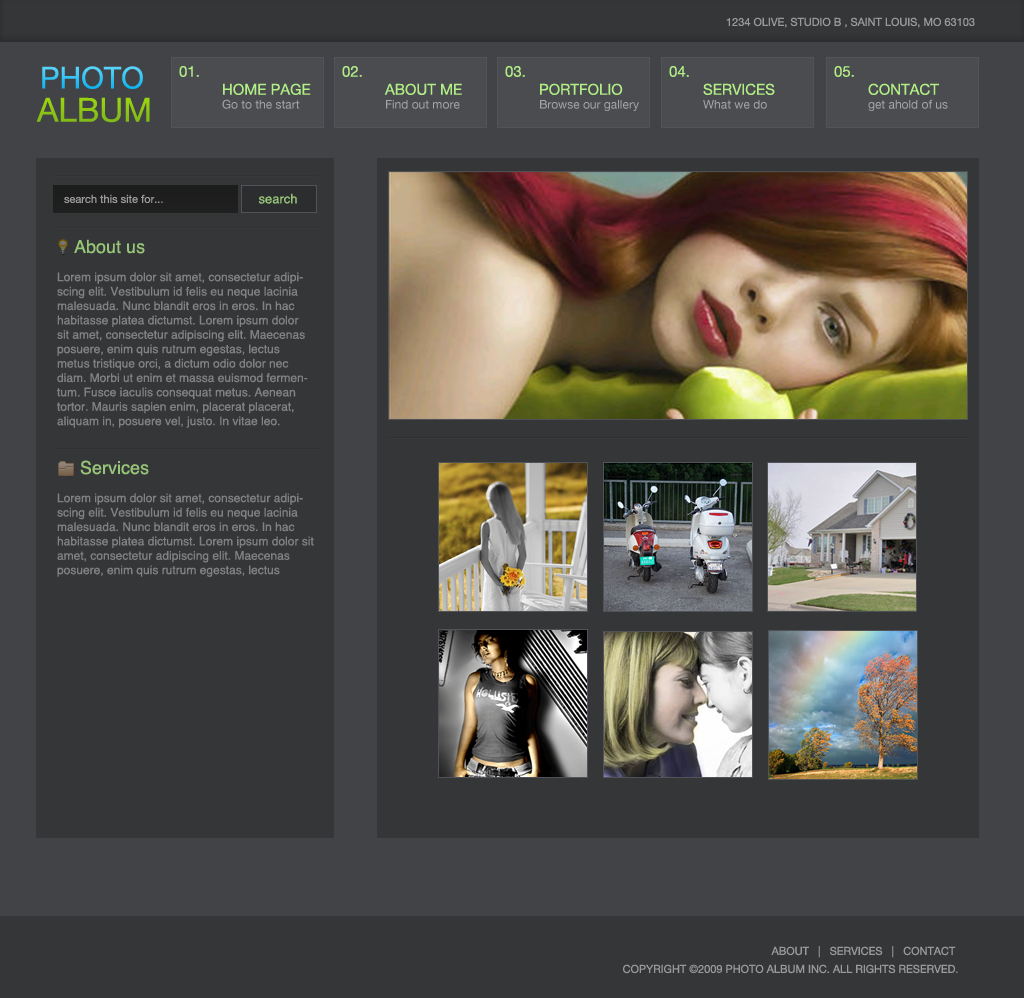
<style>
.page{position:relative;width:1024px;height:998px;background:#353638}
.page>*{position:absolute;margin:0}
.t1{font:11px "HelveticaNeue";color:#999a9a;text-transform:uppercase}
.t2{font:30px "HelveticaNeue";text-transform:uppercase}
.t3{font:15px "HelveticaNeue";color:#b1ee85;text-transform:uppercase}
.t4{font:33px "HelveticaNeue";color:#8dc614;text-transform:uppercase}
.t5{font:12px "HelveticaNeue";color:#a4a5a7}
.t6{font:11px "HelveticaNeue";color:#999a9a}
.t7{font:13px "Helvetica";color:#98c678}
.t8{font:18px "Helvetica";color:#98c678}
.t9{font:12px "Helvetica";color:#808182}
</style>
<div class="page">
<p class="t1" style="left:726px;top:17px;width:249px;height:11px">1234 OLIVE, STUDIO b , SAINT LOUIS, MO 63103</p>
<p class="t2" style="left:42px;top:66px;width:101px;height:23px">PHOTO</p>
<p class="t3" style="left:179px;top:66px;width:20px;height:11px">01.</p>
<p class="t3" style="left:342px;top:66px;width:20px;height:11px">02.</p>
<p class="t3" style="left:505px;top:66px;width:20px;height:11px">03.</p>
<p class="t3" style="left:669px;top:66px;width:20px;height:11px">04.</p>
<p class="t3" style="left:834px;top:66px;width:20px;height:11px">05.</p>
<p class="t3" style="left:223px;top:83px;width:88px;height:12px">Home Page</p>
<p class="t3" style="left:384px;top:83px;width:78px;height:12px">About Me</p>
<p class="t3" style="left:540px;top:83px;width:83px;height:12px">Portfolio</p>
<p class="t3" style="left:703px;top:83px;width:72px;height:12px">Services</p>
<p class="t3" style="left:868px;top:83px;width:71px;height:12px">contact</p>
<p class="t4" style="left:36px;top:97px;width:114px;height:26px">Album</p>
<p class="t5" style="left:222px;top:99px;width:78px;height:10px">Go to the start</p>
<p class="t5" style="left:386px;top:100px;width:74px;height:9px">Find out more</p>
<p class="t5" style="left:540px;top:100px;width:99px;height:11px">Browse our gallery</p>
<p class="t5" style="left:703px;top:100px;width:64px;height:9px">What we do</p>
<p class="t5" style="left:868px;top:99px;width:80px;height:12px">get ahold of us</p>
<p class="t6" style="left:64px;top:194px;width:99px;height:9px">search this site for...</p>
<p class="t7" style="left:258px;top:193px;width:39px;height:11px">search</p>
<p class="t8" style="left:74px;top:239px;width:71px;height:15px">About us</p>
<p class="t9" style="left:57px;top:272px;width:251px;height:156px">Lorem ipsum dolor sit amet, consectetur adipiscing elit. Vestibulum id felis eu neque lacinia malesuada. Nunc blandit eros in eros. In hac habitasse platea dictumst. Lorem ipsum dolor sit amet, consectetur adipiscing elit. Maecenas posuere, enim quis rutrum egestas, lectus metus tristique orci, a dictum odio dolor nec diam. Morbi ut enim et massa euismod fermentum. Fusce iaculis consequat metus. Aenean tortor. Mauris sapien enim, placerat placerat, aliquam in, posuere vel, justo. In vitae leo.</p>
<p class="t8" style="left:80px;top:460px;width:69px;height:15px">Services</p>
<p class="t9" style="left:57px;top:493px;width:257px;height:84px">Lorem ipsum dolor sit amet, consectetur adipiscing elit. Vestibulum id felis eu neque lacinia malesuada. Nunc blandit eros in eros. In hac habitasse platea dictumst. Lorem ipsum dolor sit amet, consectetur adipiscing elit. Maecenas posuere, enim quis rutrum egestas, lectus</p>
<p class="t1" style="left:771px;top:946px;width:185px;height:12px">about   |   services   |   contact</p>
<p class="t1" style="left:623px;top:964px;width:335px;height:10px">Copyright ©2009 Photo Album Inc. All rights reserved.</p>
</div>
